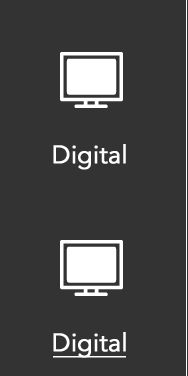
<style>
.page{position:relative;width:188px;height:376px;background:#333333}
.page>*{position:absolute;margin:0}
.t1{font:25px "Avenir-Book";letter-spacing:-0.01em;color:#ffffff;font-weight:bold}
</style>
<div class="page">
<p class="t1" style="left:53px;top:144px;width:73px;height:26px">Digital</p>
<p class="t1" style="left:53px;top:332px;width:73px;height:26px">Digital</p>
</div>
